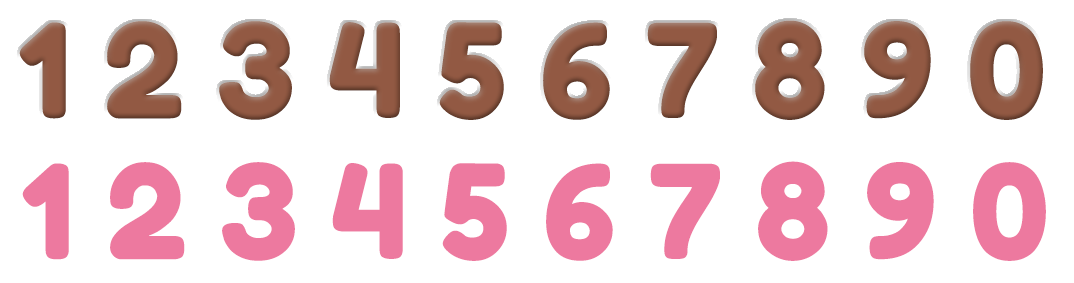
<style>
.page{position:relative;width:1074px;height:283px;background:#ffffff}
.page>*{position:absolute;margin:0}
.t1{font:130px "FredokaOne-Regular";color:#925943}
.t2{font:130px "FredokaOne-Regular";color:#ed799f}
</style>
<div class="page">
<p class="t1" style="left:19px;top:20px;width:1024px;height:100px">1 2 3 4 5 6 7 8 9 0</p>
<p class="t2" style="left:22px;top:161px;width:1024px;height:100px">1 2 3 4 5 6 7 8 9 0</p>
</div>
